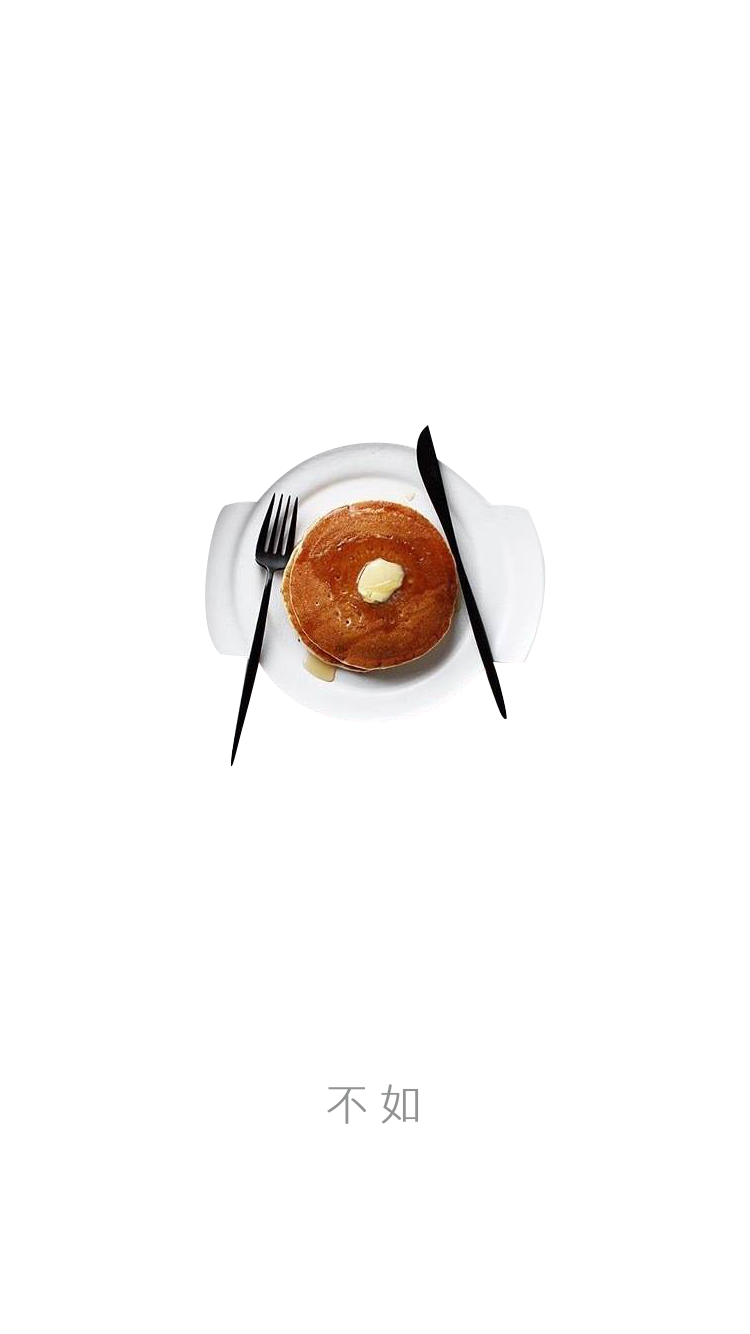
<style>
.page{position:relative;width:750px;height:1334px;background:#ffffff}
.page>*{position:absolute;margin:0}
.t1{font:42.4px "PingFang-SC-Light";letter-spacing:0.252em;color:#919393;font-weight:bold}
</style>
<div class="page">
<p class="t1" style="left:327px;top:1084px;width:92px;height:40px">不如</p>
</div>
